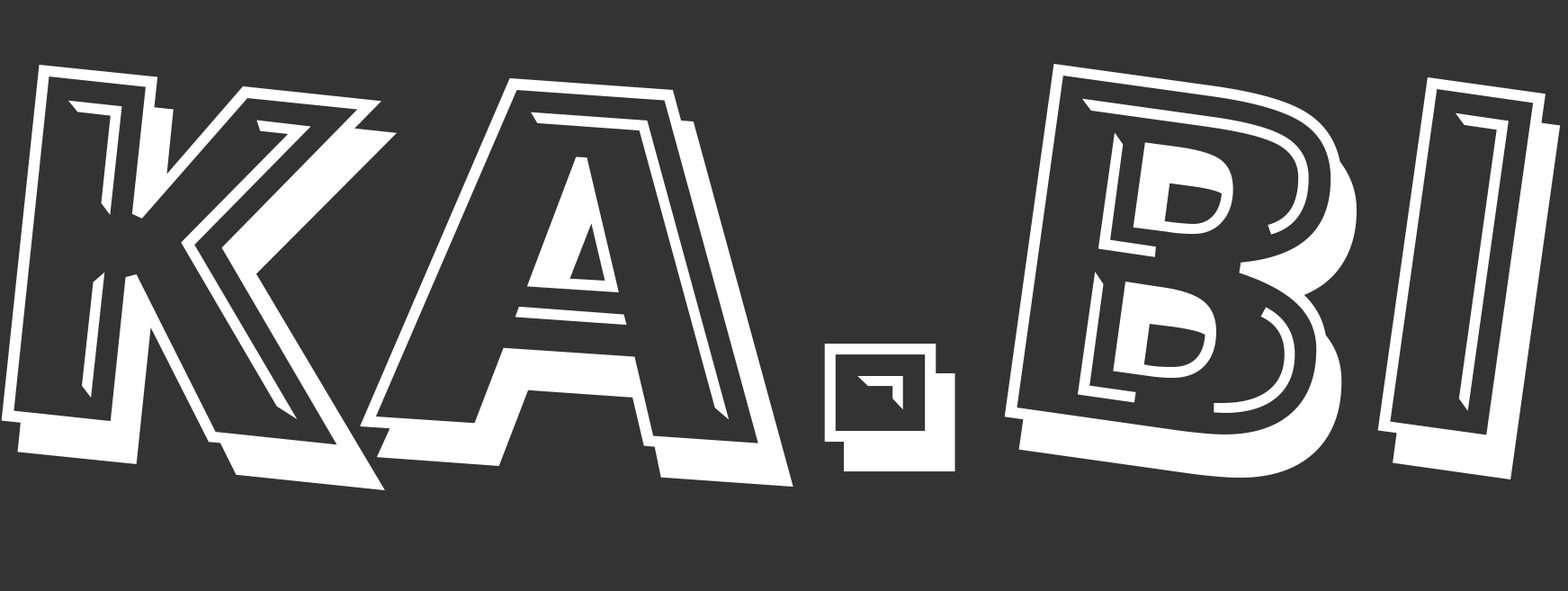
<style>
.page{position:relative;width:1568px;height:591px;background:#333333}
.page>*{position:absolute;margin:0}
.t1{font:514.5px "AlphabetSoupBT-Tilt";letter-spacing:-0.05em;color:#ffffff}
.t2{font:514.5px "AlphabetSoupBT-Tilt";color:#ffffff}
.t3{font:514.5px "AlphabetSoupBT-Tilt";letter-spacing:0.02em;color:#ffffff}
</style>
<div class="page">
<p class="t1" style="left:1px;top:65px;width:396px;height:425px">K</p>
<p class="t2" style="left:824px;top:64px;width:737px;height:415px">.BI</p>
<p class="t3" style="left:360px;top:78px;width:433px;height:409px">A</p>
</div>
